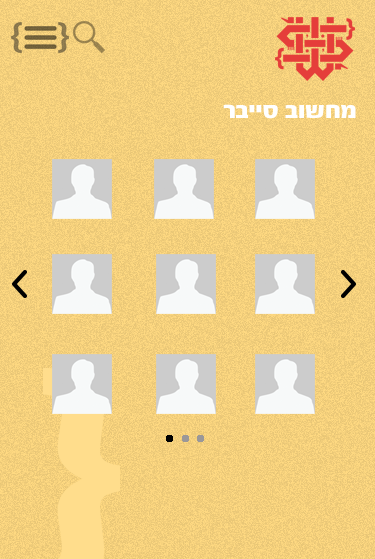
<style>
.page{position:relative;width:375px;height:559px}
.page>*{position:absolute;margin:0}
.t1{font:25px "FbScorpion-Black";color:#ffffff}
</style>
<div class="page">
<p class="t1" style="left:223px;top:104px;width:133px;height:15px">רבייס בושחמ</p>
</div>
